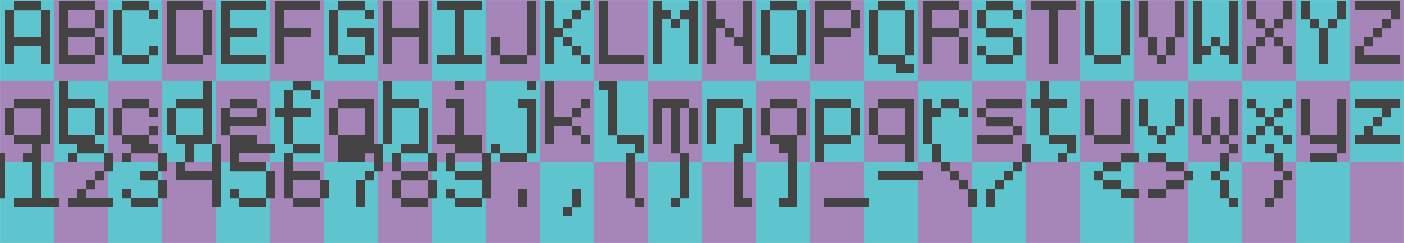
<style>
.page{position:relative;width:1404px;height:243px;background:#a685b8}
.page>*{position:absolute;margin:0}
.t1{font:144px "monogramextended";color:#434343}
</style>
<div class="page">
<p class="t1" style="left:5px;top:1px;width:1395px;height:72px">ABCDEFGHIJKLMNOPQRSTUVWXYZ</p>
<p class="t1" style="left:5px;top:81px;width:1395px;height:81px">abcdefghijklmnopqrstuvwxyz</p>
</div>
